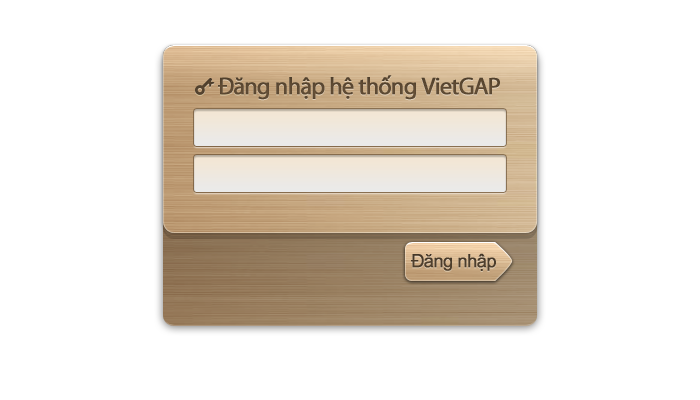
<style>
.page{position:relative;width:700px;height:400px;background:#ffffff}
.page>*{position:absolute;margin:0}
.t1{font:24px "MyriadPro-Regular";letter-spacing:-0.04em;color:#6d5539;font-weight:bold}
.t2{font:18px "ArialUnicodeMS";letter-spacing:-0.04em;color:#5d4932;font-weight:bold}
</style>
<div class="page">
<p class="t1" style="left:218px;top:75px;width:282px;height:25px">Đăng nhập hệ thống VietGAP</p>
<p class="t2" style="left:411px;top:253px;width:85px;height:18px">Đăng nhập</p>
</div>
